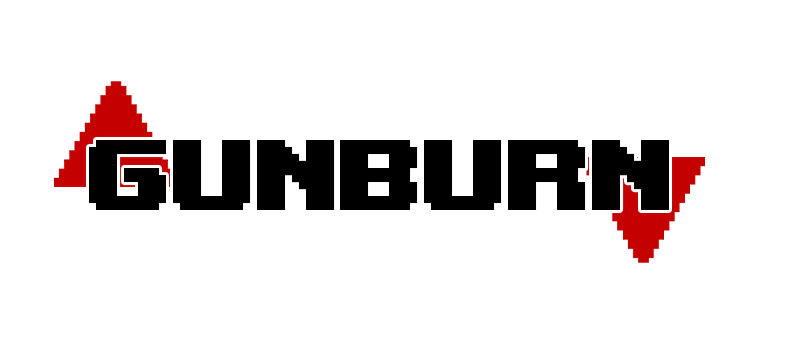
<style>
.page{position:relative;width:800px;height:350px;background:#ffffff}
.page>*{position:absolute;margin:0}
.t1{font:139.4px "UpheavalPro-Regular";color:#000000}
</style>
<div class="page">
<p class="t1" style="left:89px;top:140px;width:580px;height:70px">GUNBURN</p>
</div>
